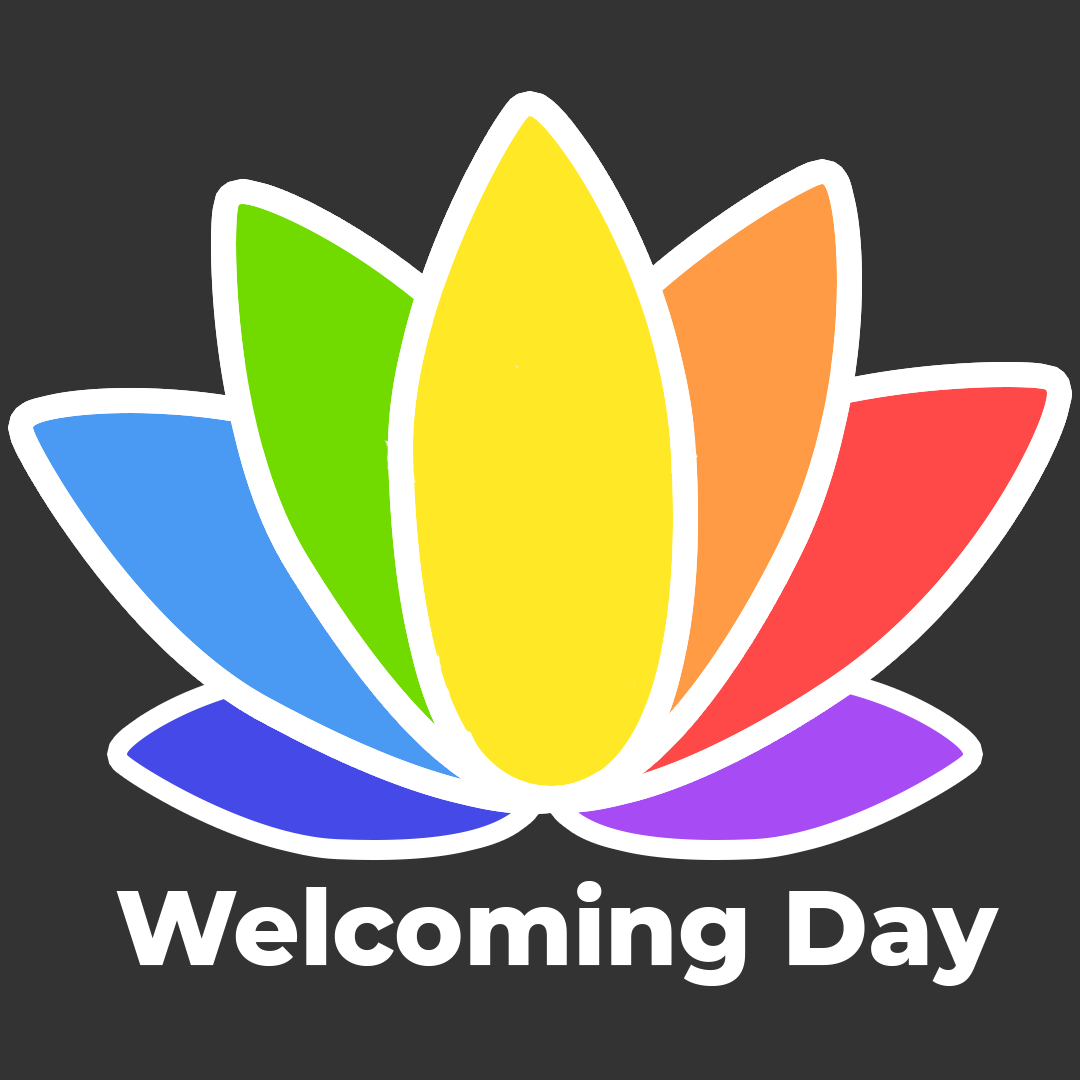
<style>
.page{position:relative;width:1080px;height:1080px;background:#333333}
.page>*{position:absolute;margin:0}
.t1{font:104.2px "Montserrat-ExtraBold";color:#ffffff}
</style>
<div class="page">
<p class="t1" style="left:116px;top:881px;width:883px;height:105px">Welcoming Day</p>
</div>
